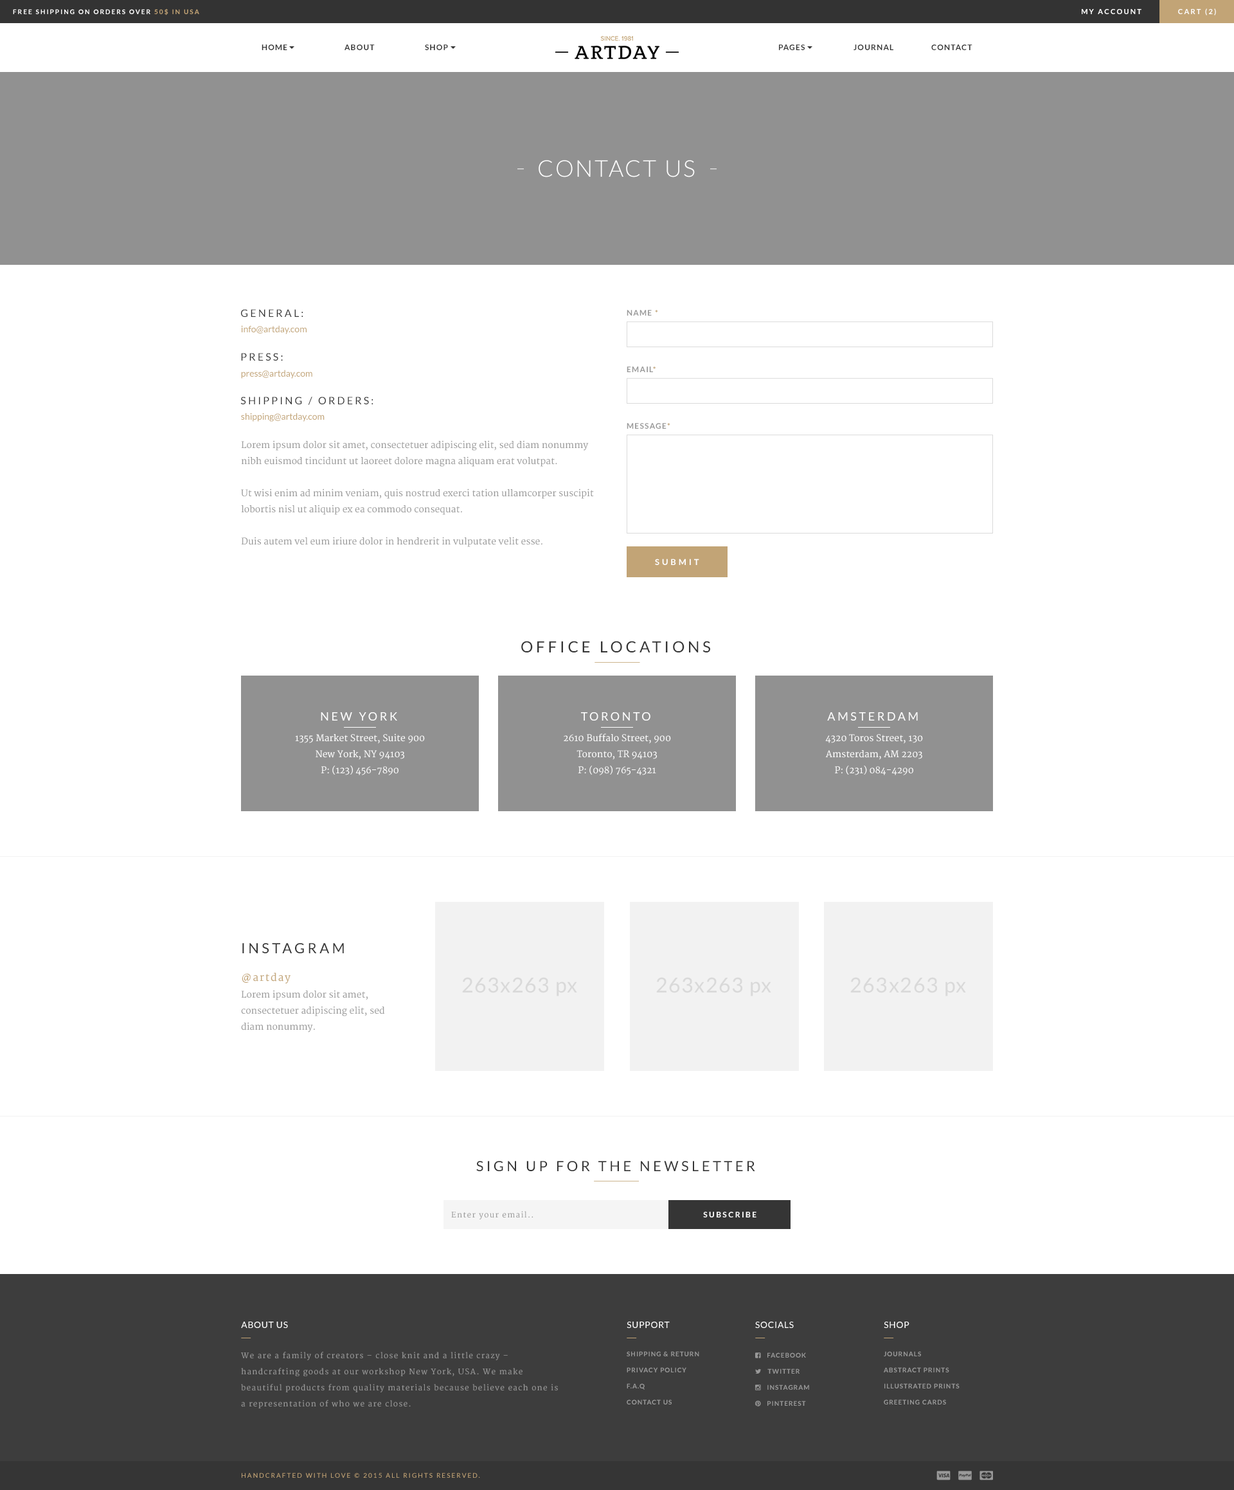
<style>
.page{position:relative;width:1234px;height:1490px;background:#ffffff}
.page>*{position:absolute;margin:0}
.t1{font:6.4px "Lato-Bold";letter-spacing:0.2em;color:#ffffff;text-transform:uppercase}
.t2{font:6.4px "Lato-Bold";letter-spacing:0.2em;color:#c2a476;text-transform:uppercase}
.t3{font:7.1px "Lato-Bold";letter-spacing:0.2em;color:#ffffff;text-transform:uppercase}
.t4{font:7.7px "Lato-Bold";letter-spacing:0.1em;color:#353535;text-transform:uppercase}
.t5{font:23.1px "Lato-Light";letter-spacing:0.075em;color:#ffffff;text-transform:uppercase}
.t6{font:10.3px "Lato-Regular";letter-spacing:0.2em;color:#353535;text-transform:uppercase}
.t7{font:7.7px "Lato-Bold";letter-spacing:0.1em;color:#999999;text-transform:uppercase}
.t8{font:7.7px "Lato-Bold";letter-spacing:0.1em;color:#c2a476;text-transform:uppercase}
.t9{font:9px "Lato-Regular";color:#c2a476}
.t10{font:9px/16.1px "Merriweather";color:#999999}
.t11{font:8.4px "Lato-Bold";letter-spacing:0.3em;color:#ffffff;text-transform:uppercase}
.t12{font:15.4px "Lato-Regular";letter-spacing:0.2em;color:#353535;text-transform:uppercase}
.t13{font:11.6px "Lato-Regular";letter-spacing:0.2em;color:#ffffff;text-transform:uppercase}
.t14{font:9px/16.1px "Merriweather";color:#ffffff}
.t15{font:14.1px "Lato-Regular";letter-spacing:0.2em;color:#353535;text-transform:uppercase}
.t16{font:10.3px "Merriweather";letter-spacing:0.1em;color:#c2a476}
.t17{font:20.6px "Lato-Regular";letter-spacing:0.05em;color:#d9d9d9}
.t18{font:7.7px "Merriweather";letter-spacing:0.1em;color:#999999}
.t19{font:7.7px "Lato-Bold";letter-spacing:0.2em;color:#ffffff;text-transform:uppercase}
.t20{font:9px "Lato-Regular";letter-spacing:0.05em;color:#ffffff;text-transform:uppercase}
.t21{font:7.7px/16.1px "Merriweather";letter-spacing:0.1em;color:#999999}
.t22{font:6.4px/16.1px "Lato-Bold";letter-spacing:0.1em;color:#999999;text-transform:uppercase}
.t23{font:6.4px "Lato-Regular";letter-spacing:0.2em;color:#c2a476;text-transform:uppercase}
</style>
<div class="page">
<p class="t1" style="left:13px;top:8px;width:186px;height:7px">FREE SHIPPING ON ORDERS OVER <span class="t2">50$ IN USA</span></p>
<p class="t3" style="left:1082px;top:9px;width:60px;height:5px">My account</p>
<p class="t3" style="left:1178px;top:8px;width:38px;height:7px">Cart (2)</p>
<p class="t4" style="left:262px;top:44px;width:25px;height:6px">Home</p>
<p class="t4" style="left:345px;top:44px;width:30px;height:6px">About</p>
<p class="t4" style="left:425px;top:44px;width:23px;height:6px">Shop</p>
<p class="t4" style="left:779px;top:44px;width:26px;height:6px">PAges</p>
<p class="t4" style="left:854px;top:44px;width:40px;height:6px">Journal</p>
<p class="t4" style="left:932px;top:44px;width:41px;height:6px">Contact</p>
<p class="t5" style="left:539px;top:160px;width:156px;height:17px">Contact us</p>
<p class="t6" style="left:241px;top:309px;width:62px;height:8px">general:</p>
<p class="t7" style="left:627px;top:310px;width:31px;height:6px">Name <span class="t8">*</span></p>
<p class="t9" style="left:241px;top:325px;width:66px;height:9px">info@artday.com</p>
<p class="t6" style="left:241px;top:353px;width:42px;height:8px">Press:</p>
<p class="t9" style="left:241px;top:370px;width:71px;height:9px">press@artday.com</p>
<p class="t7" style="left:627px;top:366px;width:29px;height:6px">email<span class="t8">*</span></p>
<p class="t6" style="left:240px;top:397px;width:134px;height:8px">Shipping / orders:</p>
<p class="t9" style="left:241px;top:413px;width:84px;height:9px">shipping@artday.com</p>
<p class="t7" style="left:627px;top:423px;width:43px;height:6px">Message<span class="t8">*</span></p>
<p class="t10" style="left:241px;top:440px;width:353px;height:107px">Lorem ipsum dolor sit amet, consectetuer adipiscing elit, sed diam nonummy nibh euismod tincidunt ut laoreet dolore magna aliquam erat volutpat.<br><br>Ut wisi enim ad minim veniam, quis nostrud exerci tation ullamcorper suscipit lobortis nisl ut aliquip ex ea commodo consequat.<br><br>Duis autem vel eum iriure dolor in hendrerit in vulputate velit esse.</p>
<p class="t11" style="left:655px;top:559px;width:44px;height:6px">Submit</p>
<p class="t12" style="left:521px;top:641px;width:189px;height:11px">Office locations</p>
<p class="t13" style="left:321px;top:712px;width:76px;height:9px">new york</p>
<p class="t13" style="left:581px;top:712px;width:70px;height:9px">toronto</p>
<p class="t13" style="left:827px;top:712px;width:91px;height:9px">Amsterdam</p>
<p class="t14" style="left:295px;top:734px;width:130px;height:41px;text-align:center">1355 Market Street, Suite 900<br>New York, NY 94103<br>P: (123) 456-7890</p>
<p class="t14" style="left:564px;top:734px;width:107px;height:41px;text-align:center">2610 Buffalo Street, 900<br>Toronto, TR 94103<br>P: (098) 765-4321</p>
<p class="t14" style="left:825px;top:734px;width:98px;height:41px;text-align:center">4320 Toros Street, 130<br>Amsterdam, AM 2203<br>P: (231) 084-4290</p>
<p class="t15" style="left:242px;top:943px;width:102px;height:10px">Instagram</p>
<p class="t16" style="left:242px;top:973px;width:49px;height:11px">@artday</p>
<p class="t17" style="left:462px;top:977px;width:115px;height:19px">263x263 px</p>
<p class="t17" style="left:656px;top:977px;width:115px;height:19px">263x263 px</p>
<p class="t17" style="left:851px;top:977px;width:115px;height:19px">263x263 px</p>
<p class="t10" style="left:241px;top:990px;width:144px;height:42px">Lorem ipsum dolor sit amet, consectetuer adipiscing elit, sed <br>diam nonummy.</p>
<p class="t15" style="left:476px;top:1161px;width:279px;height:10px">Sign up for the newsletter</p>
<p class="t18" style="left:451px;top:1211px;width:83px;height:9px">Enter your email..</p>
<p class="t19" style="left:703px;top:1212px;width:54px;height:6px">Subscribe</p>
<p class="t20" style="left:241px;top:1322px;width:47px;height:6px">About Us</p>
<p class="t20" style="left:627px;top:1322px;width:43px;height:6px">Support</p>
<p class="t20" style="left:755px;top:1322px;width:39px;height:6px">socials</p>
<p class="t20" style="left:884px;top:1322px;width:26px;height:6px">Shop</p>
<p class="t21" style="left:241px;top:1352px;width:317px;height:56px">We are a family of creators – close knit and a little crazy – handcrafting goods at our workshop New York, USA. We make beautiful products from quality materials because believe each one is a representation of who we are close.</p>
<p class="t22" style="left:627px;top:1351px;width:72px;height:54px">SHIPPING &amp; RETURN<br>PRIVACY POLICY<br>F.A.Q<br>CONTACT US</p>
<p class="t22" style="left:884px;top:1351px;width:76px;height:54px">JOURNALS<br>ABSTRACT PRINTS<br>ILLUSTRATED PRINTS<br>GREETING CARDS</p>
<p class="t23" style="left:242px;top:1473px;width:238px;height:5px">HANDCRAFTED WITH LOVE © 2015 ALL RIGHTS RESERVED.</p>
</div>
